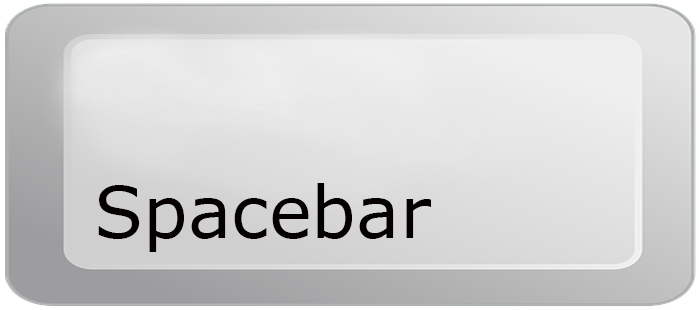
<style>
.page{position:relative;width:700px;height:310px}
.page>*{position:absolute;margin:0}
.t1{font:72px "Verdana";color:#040000}
</style>
<div class="page">
<p class="t1" style="left:98px;top:183px;width:333px;height:69px">Spacebar</p>
</div>
